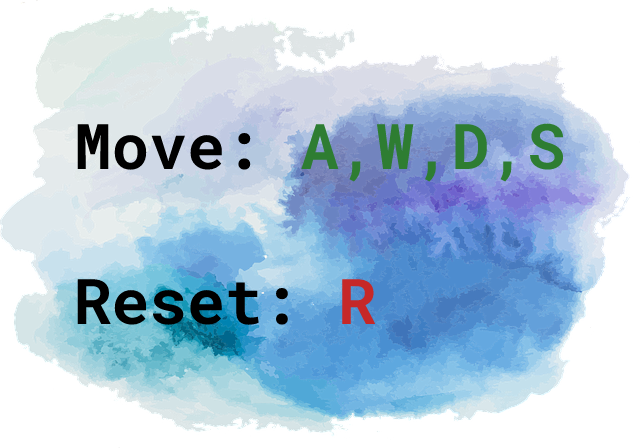
<style>
.page{position:relative;width:640px;height:448px;background:#ffffff}
.page>*{position:absolute;margin:0}
.t1{font:63px "RobotoMono-Bold";color:#2e7d32}
.t2{font:63px "RobotoMono-Bold";color:#000000}
.t3{font:63px "RobotoMono-Bold";color:#c62828}
</style>
<div class="page">
<p class="t1" style="left:77px;top:123px;width:486px;height:59px"><span class="t2">Move: </span>A,W,D,S<span class="t2">↓</span></p>
<p class="t2" style="left:77px;top:279px;width:298px;height:46px">Reset: <span class="t3">R</span></p>
</div>
